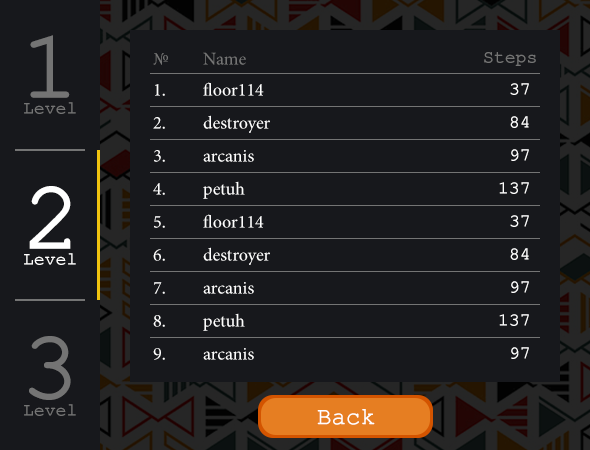
<style>
.page{position:relative;width:590px;height:450px;background:#17181c}
.page>*{position:absolute;margin:0}
.t1{font:96px "ERKurierKOI8Normal";color:#747474}
.t2{font:18px "MinionPro-Regular";color:#747474}
.t3{font:18px "ERKurierKOI8Normal";color:#747474}
.t4{font:18px "MinionPro-Regular";color:#fefefe}
.t5{font:18px "ERKurierKOI8Normal";color:#fefefe}
.t6{font:96px "ERKurierKOI8Normal";color:#ffffff}
.t7{font:18px "ERKurierKOI8Normal";color:#ffffff}
.t8{font:24px "ERKurierKOI8Normal";color:#ffffff}
</style>
<div class="page">
<p class="t1" style="left:30px;top:35px;width:40px;height:63px">1</p>
<p class="t2" style="left:153px;top:53px;width:15px;height:12px">№</p>
<p class="t2" style="left:203px;top:52px;width:43px;height:13px">Name</p>
<p class="t3" style="left:484px;top:52px;width:52px;height:14px">Steps</p>
<p class="t4" style="left:155px;top:84px;width:10px;height:12px">1.</p>
<p class="t4" style="left:203px;top:82px;width:61px;height:14px">floor114</p>
<p class="t5" style="left:510px;top:83px;width:19px;height:12px">37</p>
<p class="t3" style="left:24px;top:102px;width:52px;height:12px">Level</p>
<p class="t4" style="left:153px;top:117px;width:12px;height:12px">2.</p>
<p class="t4" style="left:203px;top:115px;width:67px;height:18px">destroyer</p>
<p class="t5" style="left:510px;top:116px;width:19px;height:12px">84</p>
<p class="t4" style="left:154px;top:150px;width:11px;height:12px">3.</p>
<p class="t4" style="left:203px;top:150px;width:51px;height:12px">arcanis</p>
<p class="t5" style="left:511px;top:149px;width:18px;height:12px">97</p>
<p class="t4" style="left:153px;top:183px;width:12px;height:12px">4.</p>
<p class="t4" style="left:203px;top:181px;width:42px;height:18px">petuh</p>
<p class="t5" style="left:499px;top:182px;width:30px;height:12px">137</p>
<p class="t6" style="left:29px;top:186px;width:42px;height:63px">2</p>
<p class="t4" style="left:154px;top:216px;width:11px;height:12px">5.</p>
<p class="t4" style="left:203px;top:214px;width:61px;height:14px">floor114</p>
<p class="t5" style="left:510px;top:215px;width:19px;height:12px">37</p>
<p class="t7" style="left:24px;top:253px;width:52px;height:12px">Level</p>
<p class="t4" style="left:153px;top:249px;width:12px;height:12px">6.</p>
<p class="t4" style="left:203px;top:247px;width:67px;height:18px">destroyer</p>
<p class="t5" style="left:510px;top:248px;width:19px;height:12px">84</p>
<p class="t5" style="left:511px;top:281px;width:18px;height:12px">97</p>
<p class="t4" style="left:154px;top:282px;width:11px;height:12px">7.</p>
<p class="t4" style="left:203px;top:282px;width:51px;height:12px">arcanis</p>
<p class="t4" style="left:153px;top:315px;width:12px;height:12px">8.</p>
<p class="t4" style="left:203px;top:313px;width:42px;height:18px">petuh</p>
<p class="t5" style="left:499px;top:314px;width:30px;height:12px">137</p>
<p class="t1" style="left:29px;top:336px;width:42px;height:64px">3</p>
<p class="t4" style="left:153px;top:348px;width:12px;height:12px">9.</p>
<p class="t4" style="left:203px;top:348px;width:51px;height:12px">arcanis</p>
<p class="t5" style="left:511px;top:347px;width:18px;height:12px">97</p>
<p class="t3" style="left:24px;top:404px;width:52px;height:12px">Level</p>
<p class="t8" style="left:317px;top:409px;width:58px;height:16px">Back</p>
</div>
